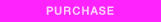
<style>
.page{position:relative;width:161px;height:22px;background:#fe22fd}
.page>*{position:absolute;margin:0}
.t1{font:11px "HelveticaNeue-Medium";letter-spacing:0.1em;color:#ffd0ff}
</style>
<div class="page">
<p class="t1" style="left:46px;top:6px;width:68px;height:9px">PURCHASE</p>
</div>
